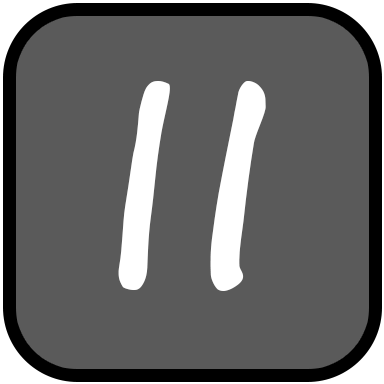
<style>
.page{position:relative;width:384px;height:384px;background:#5a5a5a}
.page>*{position:absolute;margin:0}
.t1{font:289px "SegoeScript";color:#ffffff}
</style>
<div class="page">
<p class="t1" style="left:118px;top:81px;width:148px;height:210px">II</p>
</div>
